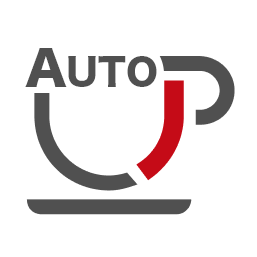
<style>
.page{position:relative;width:257px;height:257px;background:#ffffff}
.page>*{position:absolute;margin:0}
.t1{font:36px "HiraKakuStd-W8";color:#505050}
.t2{font:48px "HiraKakuStd-W8";color:#505050}
</style>
<div class="page">
<p class="t1" style="left:25px;top:48px;width:132px;height:39px"><span class="t2">A</span>UTO</p>
</div>
